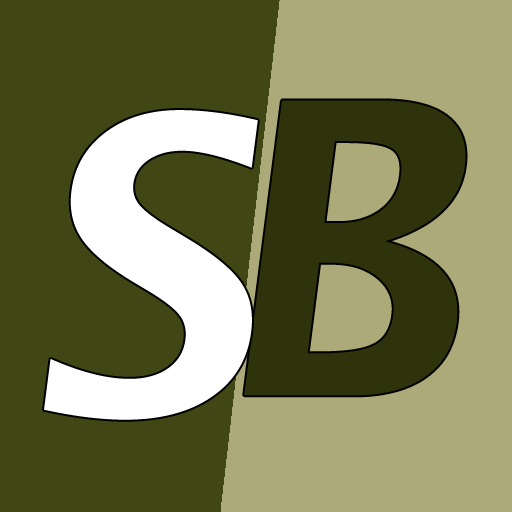
<style>
.page{position:relative;width:512px;height:512px;background:#414615}
.page>*{position:absolute;margin:0}
.t1{font:411px "LucidaGrande-Bold";color:#2f330b}
.t2{font:411px "LucidaGrande-Bold";color:#ffffff}
</style>
<div class="page">
<p class="t1" style="left:244px;top:100px;width:222px;height:296px">B</p>
<p class="t2" style="left:44px;top:110px;width:214px;height:310px">S</p>
</div>
